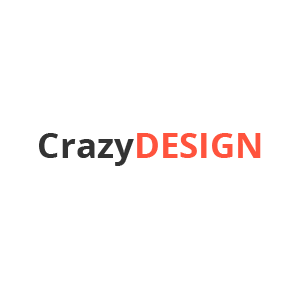
<style>
.page{position:relative;width:300px;height:300px;background:#ffffff}
.page>*{position:absolute;margin:0}
.t1{font:35px "OpenSans-Bold";color:#ff533d;text-transform:uppercase}
.t2{font:35px "OpenSans-Bold";color:#333333}
</style>
<div class="page">
<p class="t1" style="left:39px;top:133px;width:222px;height:33px"><span class="t2">Crazy</span>Design</p>
</div>
